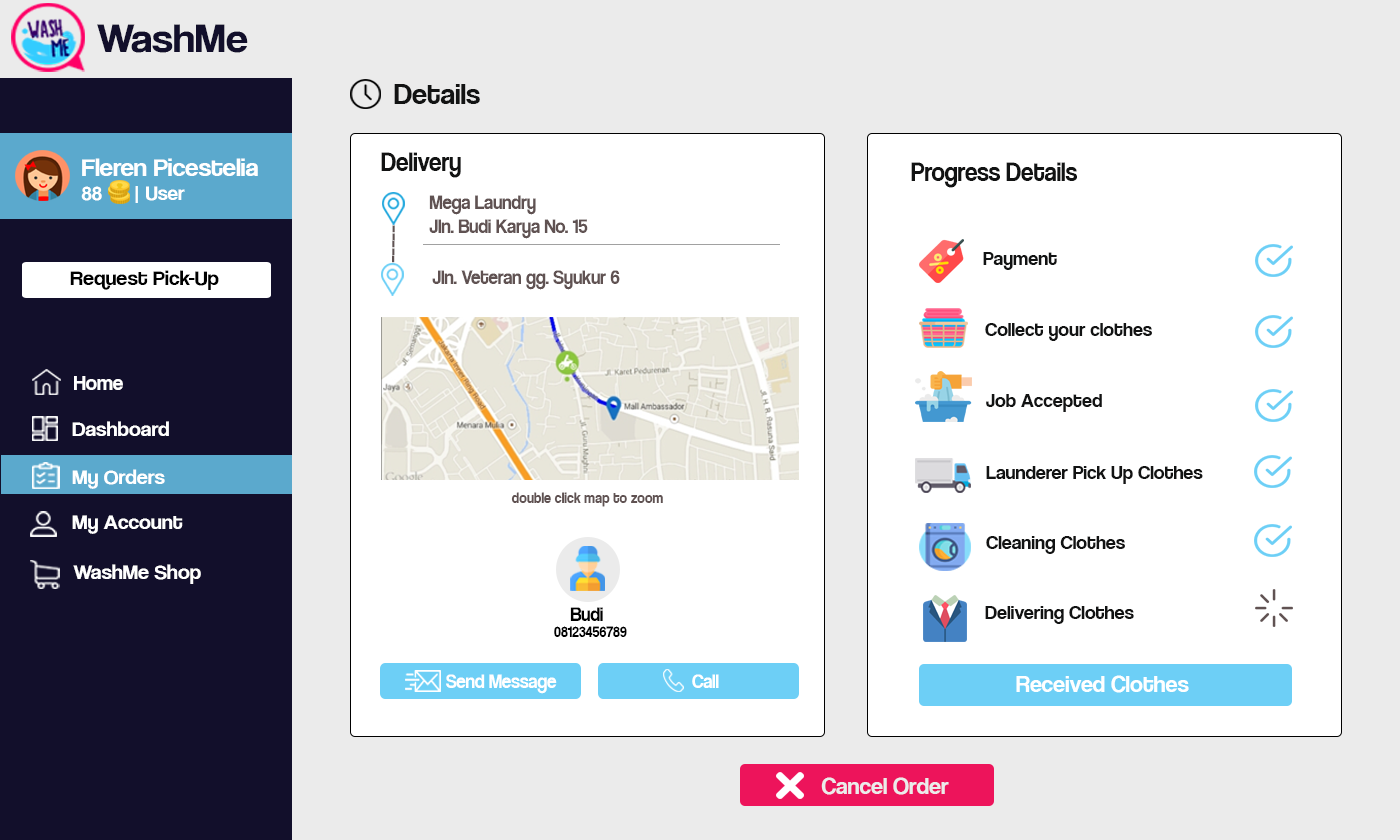
<style>
.page{position:relative;width:1400px;height:840px;background:#ffffff}
.page>*{position:absolute;margin:0}
.t1{font:42.1px "CoolveticaRg-Regular";color:#120f2b;scale:1.05 1}
.t2{font:30px "CoolveticaRg-Regular";color:#121313}
.t3{font:25.2px "CoolveticaRg-Regular";color:#ffffff;scale:1.05 1}
.t4{font:20px "CoolveticaRg-Regular";color:#ffffff;scale:1.05 1}
.t5{font:27px "CoolveticaRg-Regular";color:#121313;scale:0.91 1}
.t6{font:20.3px "CoolveticaRg-Regular";color:#605252;scale:0.91 1}
.t7{font:24.7px "CoolveticaRg-Regular";color:#605252;scale:1.09 1}
.t8{font:20px "CoolveticaRg-Regular";color:#121313}
.t9{font:21px "CoolveticaRg-Regular";color:#000000;scale:1.05 1}
.t10{font:21px "CoolveticaRg-Regular";color:#ffffff}
.t11{font:21px "CoolveticaRg-Regular";color:#ffffff;scale:1.05 1}
.t12{font:15.8px "CoolveticaRg-Regular";color:#605252;scale:0.91 1}
.t13{font:20.3px "CoolveticaRg-Regular";color:#000000;scale:0.91 1}
.t14{font:15.8px "CoolveticaRg-Regular";color:#000000;scale:0.91 1}
.t15{font:20.3px "CoolveticaRg-Regular";color:#ffffff;scale:0.91 1}
.t16{font:24px "CoolveticaRg-Regular";color:#feffff}
.t17{font:24px "CoolveticaRg-Regular";color:#ebebeb}
</style>
<div class="page">
<p class="t1" style="left:97px;top:24px;width:151px;height:29px">WashMe</p>
<p class="t2" style="left:394px;top:84px;width:86px;height:20px">Details</p>
<p class="t3" style="left:81px;top:158px;width:177px;height:45px">Fleren Picestelia<br><span class="t4">88      | User</span></p>
<p class="t5" style="left:381px;top:152px;width:80px;height:26px">Delivery</p>
<p class="t5" style="left:911px;top:162px;width:166px;height:26px">Progress Details</p>
<p class="t6" style="left:429px;top:195px;width:159px;height:44px">Mega Laundry<br>Jln. Budi Karya No. 15</p>
<p class="t7" style="left:392px;top:225px;width:3px;height:38px;rotate:91deg">-----</p>
<p class="t8" style="left:983px;top:252px;width:74px;height:18px">Payment</p>
<p class="t9" style="left:70px;top:270px;width:149px;height:20px">Request Pick-Up</p>
<p class="t6" style="left:432px;top:270px;width:188px;height:20px">Jln. Veteran gg. Syukur 6</p>
<p class="t8" style="left:985px;top:323px;width:167px;height:18px">Collect your clothes</p>
<p class="t10" style="left:74px;top:376px;width:49px;height:14px">Home</p>
<p class="t8" style="left:986px;top:394px;width:116px;height:18px">Job Accepted</p>
<p class="t11" style="left:72px;top:421px;width:97px;height:15px">Dashboard</p>
<p class="t11" style="left:72px;top:469px;width:93px;height:20px">My Orders</p>
<p class="t8" style="left:986px;top:466px;width:217px;height:18px">Launderer Pick Up Clothes</p>
<p class="t12" style="left:511px;top:492px;width:152px;height:15px">double click map to zoom</p>
<p class="t11" style="left:72px;top:515px;width:111px;height:19px">My Account</p>
<p class="t8" style="left:986px;top:536px;width:139px;height:18px">Cleaning Clothes</p>
<p class="t11" style="left:73px;top:564px;width:128px;height:20px">WashMe Shop</p>
<p class="t8" style="left:985px;top:606px;width:149px;height:18px">Delivering Clothes</p>
<p class="t13" style="left:570px;top:607px;width:33px;height:14px">Budi</p>
<p class="t14" style="left:554px;top:626px;width:73px;height:11px">08123456789</p>
<p class="t15" style="left:446px;top:674px;width:111px;height:20px">Send Message</p>
<p class="t15" style="left:692px;top:674px;width:27px;height:14px">Call</p>
<p class="t16" style="left:1016px;top:675px;width:173px;height:18px">Received Clothes</p>
<p class="t17" style="left:821px;top:777px;width:128px;height:18px">Cancel Order</p>
</div>
